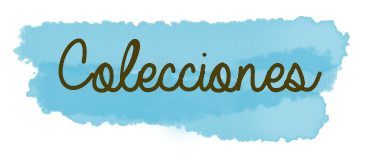
<style>
.page{position:relative;width:389px;height:166px;background:#ffffff}
.page>*{position:absolute;margin:0}
.t1{font:77.3px "AlwaysInMyHeart";color:#4c3e06}
</style>
<div class="page">
<p class="t1" style="left:58px;top:38px;width:264px;height:55px">Colecciones</p>
</div>
